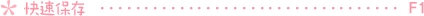
<style>
.page{position:relative;width:424px;height:16px;background:#ffffff}
.page>*{position:absolute;margin:0}
.t1{font:18px "¢è?";color:#ff93a5}
</style>
<div class="page">
<p class="t1" style="left:24px;top:0px;width:61px;height:16px">快速保存</p>
</div>
